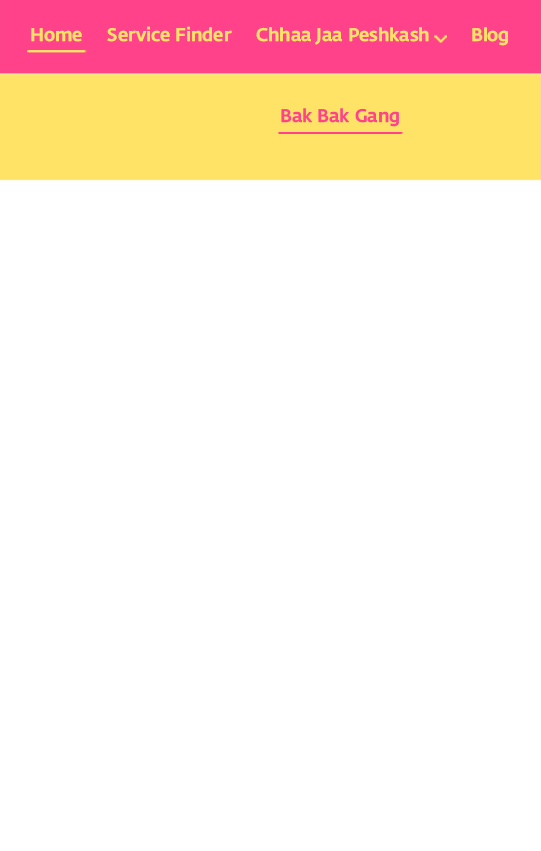
<style>
.page{position:relative;width:541px;height:851px;background:#ffffff}
.page>*{position:absolute;margin:0}
.t1{font:21.1px "FedraSansDevanagariB-Medium";color:#ffe366}
.t2{font:21.1px "FedraSansDevanagariB-Medium";color:#ff428a}
</style>
<div class="page">
<p class="t1" style="left:31px;top:28px;width:51px;height:14px">Home</p>
<p class="t1" style="left:107px;top:26px;width:125px;height:16px">Service Finder</p>
<p class="t1" style="left:256px;top:27px;width:173px;height:18px">Chhaa Jaa Peshkash</p>
<p class="t1" style="left:472px;top:27px;width:36px;height:19px">Blog</p>
<p class="t2" style="left:281px;top:108px;width:118px;height:19px">Bak Bak Gang</p>
</div>
